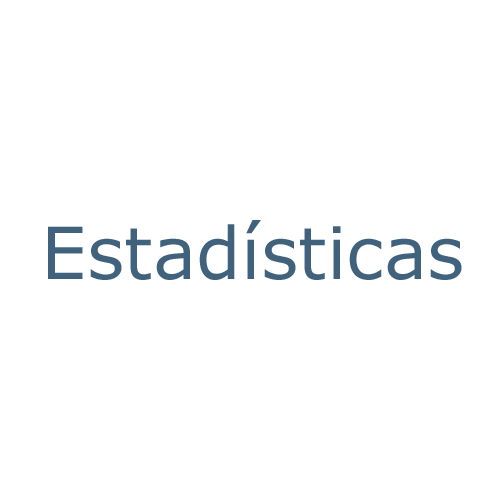
<style>
.page{position:relative;width:500px;height:500px;background:#ffffff}
.page>*{position:absolute;margin:0}
.t1{font:72px "MSReferenceSansSerif";color:#40627c}
</style>
<div class="page">
<p class="t1" style="left:48px;top:220px;width:414px;height:60px">Estadísticas</p>
</div>
